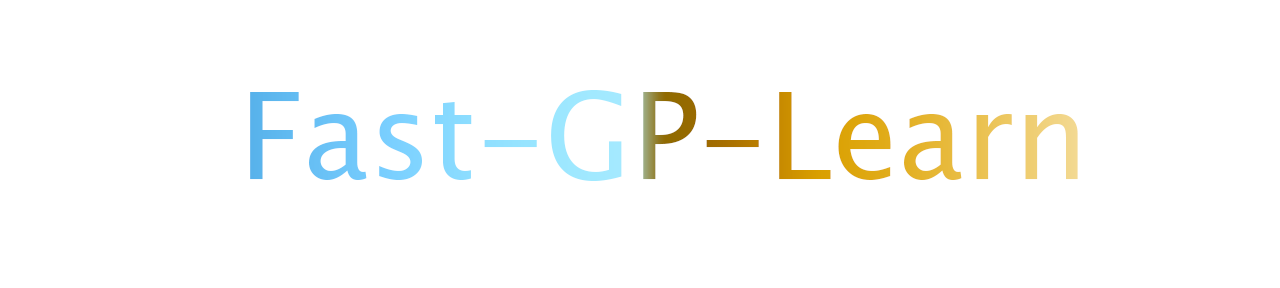
<style>
.page{position:relative;width:1280px;height:288px;background:#ffffff}
.page>*{position:absolute;margin:0}
.t1{font:120px "LucidaSansUnicode"}
</style>
<div class="page">
<p class="t1" style="left:250px;top:90px;width:828px;height:91px">Fast-GP-Learn</p>
</div>
